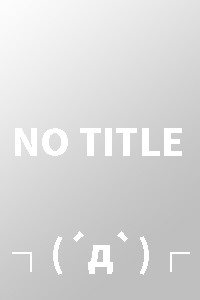
<style>
.page{position:relative;width:200px;height:300px}
.page>*{position:absolute;margin:0}
.t1{font:37.5px "NotoSansCJKtc-Black";color:#ffffff}
</style>
<div class="page">
<p class="t1" style="left:15px;top:128px;width:167px;height:28px">NO TITLE</p>
<p class="t1" style="left:12px;top:231px;width:178px;height:44px">┐(´д`)┌</p>
</div>
